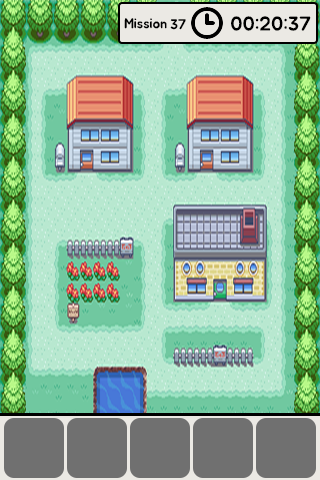
<style>
.page{position:relative;width:320px;height:480px}
.page>*{position:absolute;margin:0}
.t1{font:20px "BMJUA";color:#000000}
.t2{font:14px "BMJUA";color:#000000}
</style>
<div class="page">
<p class="t1" style="left:231px;top:16px;width:80px;height:15px">00:20:37</p>
<p class="t2" style="left:124px;top:18px;width:43px;height:11px">Mission</p>
<p class="t2" style="left:170px;top:19px;width:16px;height:11px">37</p>
</div>
